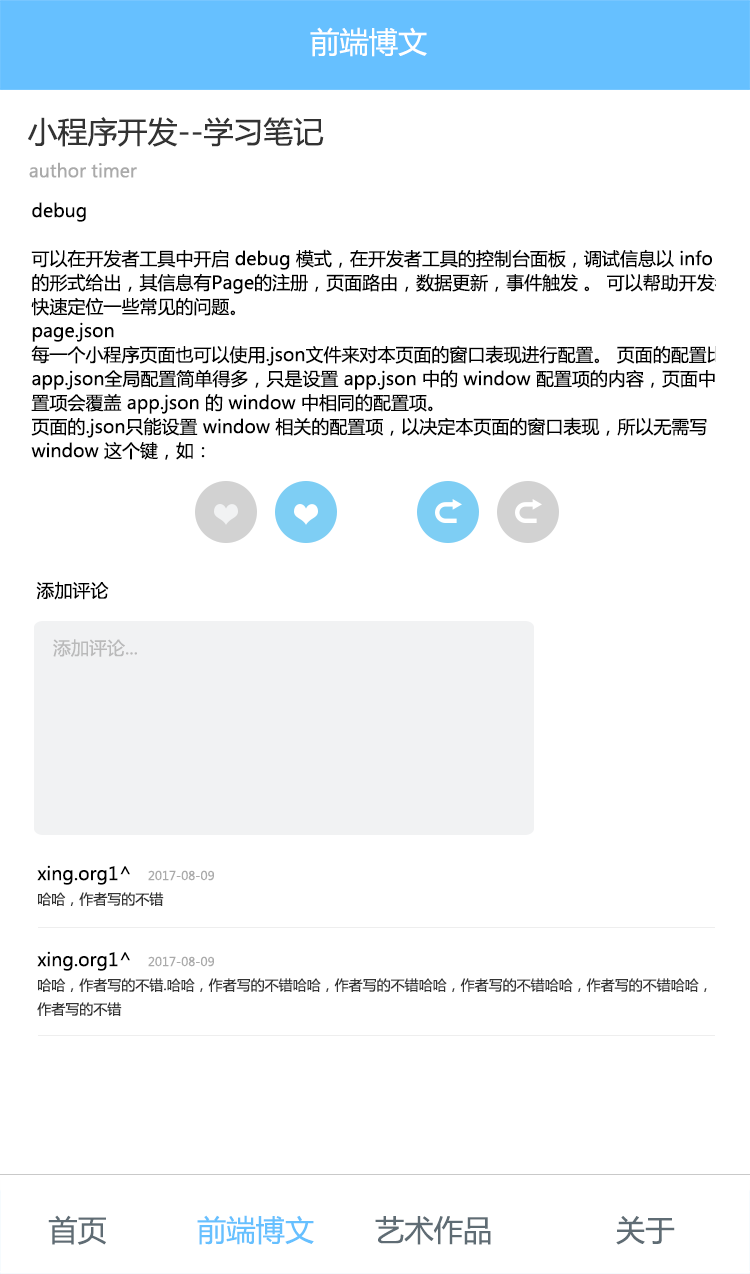
<style>
.page{position:relative;width:750px;height:1274px;background:#ffffff}
.page>*{position:absolute;margin:0}
.t1{font:29.3px "MicrosoftYaHei";color:#ffffff}
.t2{font:30px "MicrosoftYaHei";color:#333333}
.t3{font:18px "MicrosoftYaHei";color:#aaaaaa}
.t4{font:18px/24px "MicrosoftYaHei";color:#000000}
.t5{font:18px "MicrosoftYaHei";color:#000000}
.t6{font:18px "MicrosoftYaHei";color:#bababa}
.t7{font:12px/24px "MicrosoftYaHei";color:#aaaaaa}
.t8{font:14px/24px "MicrosoftYaHei";color:#333333}
.t9{font:29.3px "MicrosoftYaHei";color:#5f6c74}
.t10{font:29.3px "MicrosoftYaHei";color:#66c0ff}
</style>
<div class="page">
<p class="t1" style="left:310px;top:27px;width:117px;height:30px">前端博文</p>
<p class="t2" style="left:28px;top:117px;width:296px;height:30px">小程序开发--学习笔记</p>
<p class="t3" style="left:29px;top:162px;width:108px;height:16px">author timer</p>
<p class="t4" style="left:31px;top:202px;width:703px;height:258px">debug<br><br>可以在开发者工具中开启 debug 模式，在开发者工具的控制台面板，调试信息以 info <br>的形式给出，其信息有Page的注册，页面路由，数据更新，事件触发 。 可以帮助开发者<br>快速定位一些常见的问题。<br>page.json<br>每一个小程序页面也可以使用.json文件来对本页面的窗口表现进行配置。 页面的配置比<br>app.json全局配置简单得多，只是设置 app.json 中的 window 配置项的内容，页面中配<br>置项会覆盖 app.json 的 window 中相同的配置项。<br>页面的.json只能设置 window 相关的配置项，以决定本页面的窗口表现，所以无需写 <br>window 这个键，如：</p>
<p class="t5" style="left:36px;top:581px;width:73px;height:19px">添加评论</p>
<p class="t6" style="left:53px;top:639px;width:84px;height:18px">添加评论...</p>
<p class="t4" style="left:37px;top:865px;width:177px;height:41px">xing.org1^   <span class="t7">2017-08-09<br></span><span class="t8">哈哈，作者写的不错</span></p>
<p class="t8" style="left:37px;top:951px;width:670px;height:65px"><span class="t4">xing.org1^   </span><span class="t7">2017-08-09<br></span>哈哈，作者写的不错.哈哈，作者写的不错哈哈，作者写的不错哈哈，作者写的不错哈哈，作者写的不错哈哈，<br>作者写的不错</p>
<p class="t9" style="left:48px;top:1215px;width:58px;height:30px">首页</p>
<p class="t10" style="left:197px;top:1215px;width:117px;height:30px">前端博文</p>
<p class="t9" style="left:375px;top:1216px;width:116px;height:29px">艺术作品</p>
<p class="t9" style="left:616px;top:1216px;width:59px;height:29px">关于</p>
</div>
